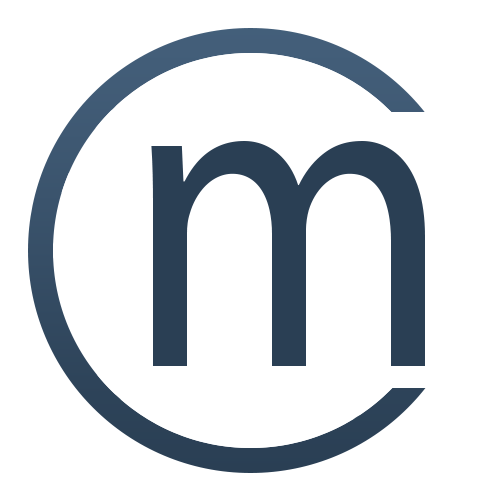
<style>
.page{position:relative;width:500px;height:500px;background:#ffffff}
.page>*{position:absolute;margin:0}
.t1{font:455.4px "MyriadPro-Regular";color:#2a3f54;scale:0.87 1}
</style>
<div class="page">
<p class="t1" style="left:151px;top:141px;width:274px;height:225px">m</p>
</div>
